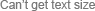
<style>
.page{position:relative;width:95px;height:11px;background:#ffffff}
.page>*{position:absolute;margin:0}
.t1{font:12px "ArialMT";color:#777777}
</style>
<div class="page">
<p class="t1" style="left:0px;top:0px;width:95px;height:11px">Can’t get text size</p>
</div>
